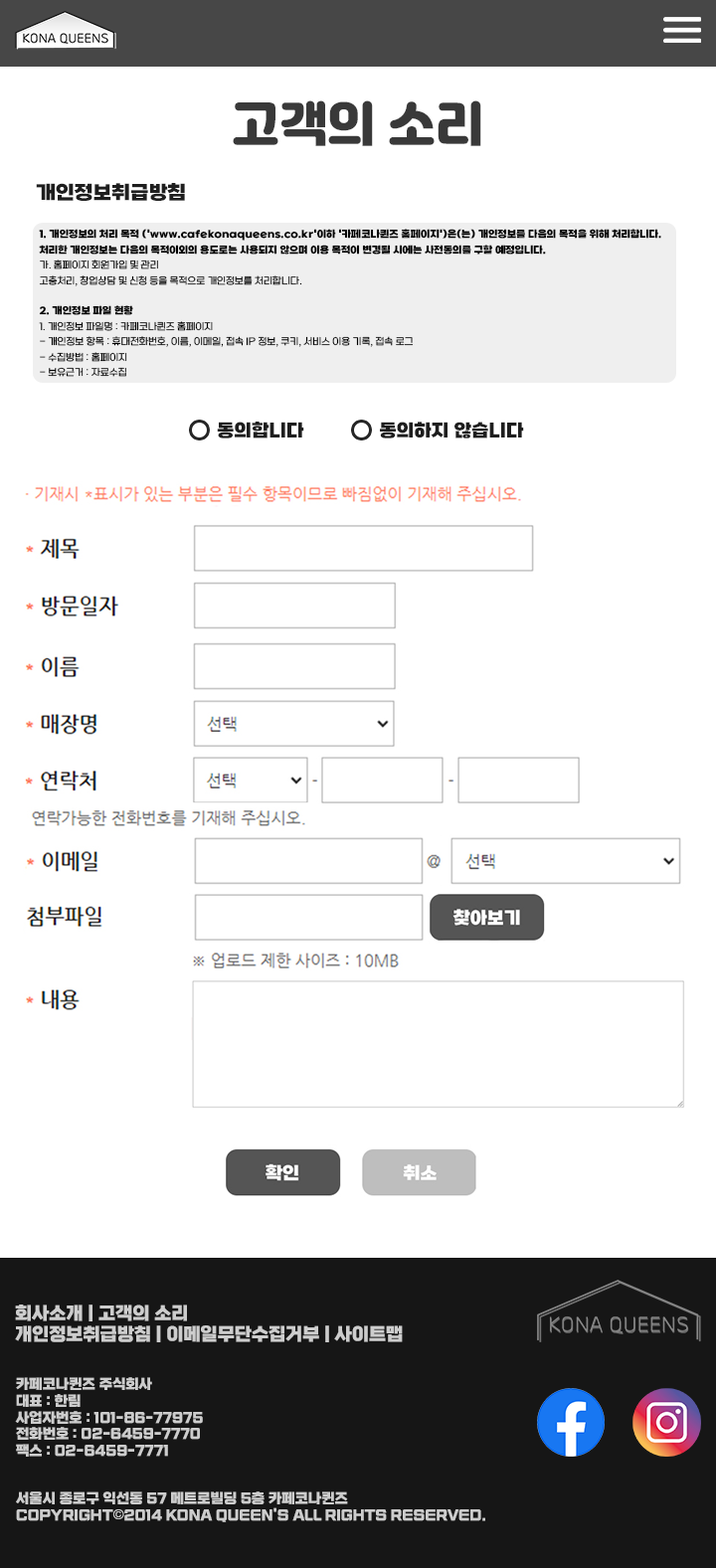
<style>
.page{position:relative;width:716px;height:1568px;background:#ffffff}
.page>*{position:absolute;margin:0}
.t1{font:47.7px "Jalnan";color:#393939}
.t2{font:19.4px "SBAggroB";color:#1e1e1e}
.t3{font:9.7px/15.4px "SBAggroL";color:#000000}
.t4{font:9.7px/15.4px "SBAggroB";color:#000000}
.t5{font:18.2px "SBAggroB";color:#1e1e1e}
.t6{font:17.9px "esamanruBold";color:#cdcdcd}
.t7{font:13.9px "esamanruBold";color:#cdcdcd}
.t8{font:13.9px "Gulim";color:#cdcdcd}
</style>
<div class="page">
<p class="t1" style="left:233px;top:100px;width:248px;height:46px">고객의 소리</p>
<p class="t2" style="left:36px;top:183px;width:149px;height:18px">개인정보취급방침</p>
<p class="t3" style="left:39px;top:229px;width:622px;height:148px"><span class="t4">1. 개인정보의 처리 목적 ('www.cafekonaqueens.co.kr'이하 '카페코나퀸즈 홈페이지')은(는) 개인정보를 다음의 목적을 위해 처리합니다. 처리한 개인정보는 다음의 목적이외의 용도로는 사용되지 않으며 이용 목적이 변경될 시에는 사전동의를 구할 예정입니다.<br></span>가. 홈페이지 회원가입 및 관리<br>고충처리, 창업상담 및 신청 등을 목적으로 개인정보를 처리합니다.<br><br><span class="t4">2. 개인정보 파일 현황<br></span>1. 개인정보 파일명 : 카페코나퀸즈 홈페이지<br>- 개인정보 항목 : 휴대전화번호, 이름, 이메일, 접속 IP 정보, 쿠키, 서비스 이용 기록, 접속 로그<br>- 수집방법 : 홈페이지<br>- 보유근거 : 자료수집<br>- 보유기간 : 3년<br>- 관련법령 : 소비자의 불만 또는 분쟁처리에 관한 기록 : 3년, 신용정보의 수집/처리 및 이용 등에 관한 기록 : 3년</p>
<p class="t5" style="left:217px;top:422px;width:87px;height:16px">동의합니다</p>
<p class="t5" style="left:380px;top:422px;width:144px;height:16px">동의하지 않습니다</p>
<p class="t6" style="left:15px;top:1305px;width:388px;height:37px">회사소개 | 고객의 소리 <br>개인정보취급방침 | 이메일무단수집거부 | 사이트맵</p>
<p class="t7" style="left:15px;top:1377px;width:470px;height:145px">카페코나퀸즈 주식회사   <br>대표 : 한림   <br>사업자번호 : 101-86-77975  <br>전화번호 : 02-6459-7770   <br>팩스 : 02-6459-7771<br><br><br>서울시 종로구 익선동 57 메트로빌딩 5층 카페코나퀸즈<br>COPYRIGHT<span class="t8">©</span>2014 KONA QUEEN'S ALL RIGHTS RESERVED.</p>
</div>
